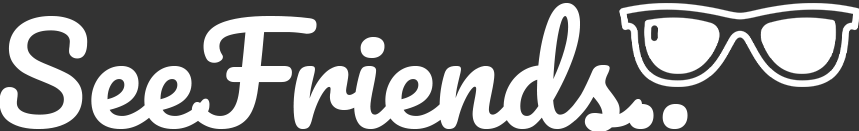
<style>
.page{position:relative;width:859px;height:131px;background:#333333}
.page>*{position:absolute;margin:0}
.t1{font:133.3px "Pacifico-Regular";color:#ffffff}
</style>
<div class="page">
<p class="t1" style="left:0px;top:3px;width:688px;height:129px">SeeFriends..</p>
</div>
